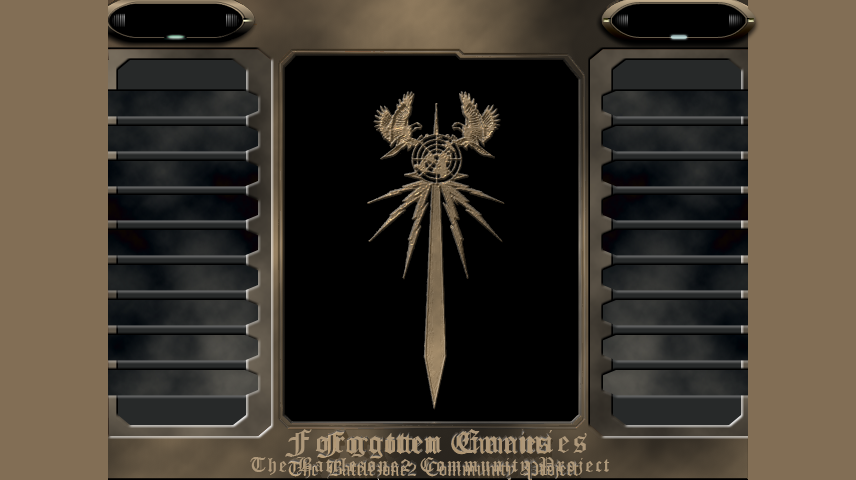
<style>
.page{position:relative;width:856px;height:480px;background:#000000}
.page>*{position:absolute;margin:0}
.t1{font:32px "OldEnglishTextMT";letter-spacing:0.1em;color:#ae987a}
.t2{font:20px "OldEnglishTextMT";letter-spacing:0.1em;color:#ae987a}
</style>
<div class="page">
<p class="t1" style="left:285px;top:429px;width:302px;height:29px">Forgotten Enemies</p>
<p class="t2" style="left:250px;top:457px;width:360px;height:18px">The Battlezone2 Community Project</p>
</div>
